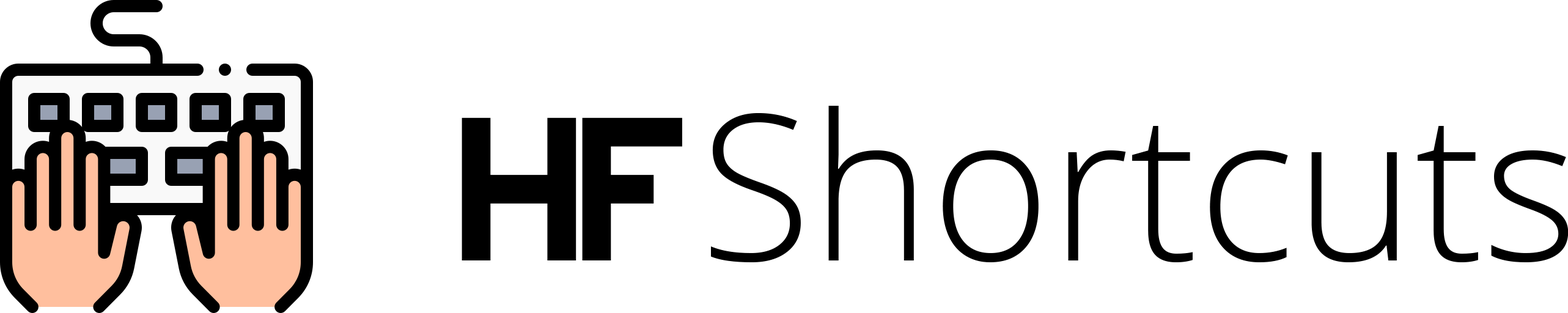
<style>
.page{position:relative;width:1568px;height:313px;background:#ffffff}
.page>*{position:absolute;margin:0}
.t1{font:203.8px "OpenSans-Light";color:#000000}
.t2{font:203.8px "Righteous-Regular";letter-spacing:-0.1em;color:#000000}
</style>
<div class="page">
<p class="t1" style="left:462px;top:106px;width:1107px;height:156px"><span class="t2">HF </span>Shortcuts</p>
</div>
